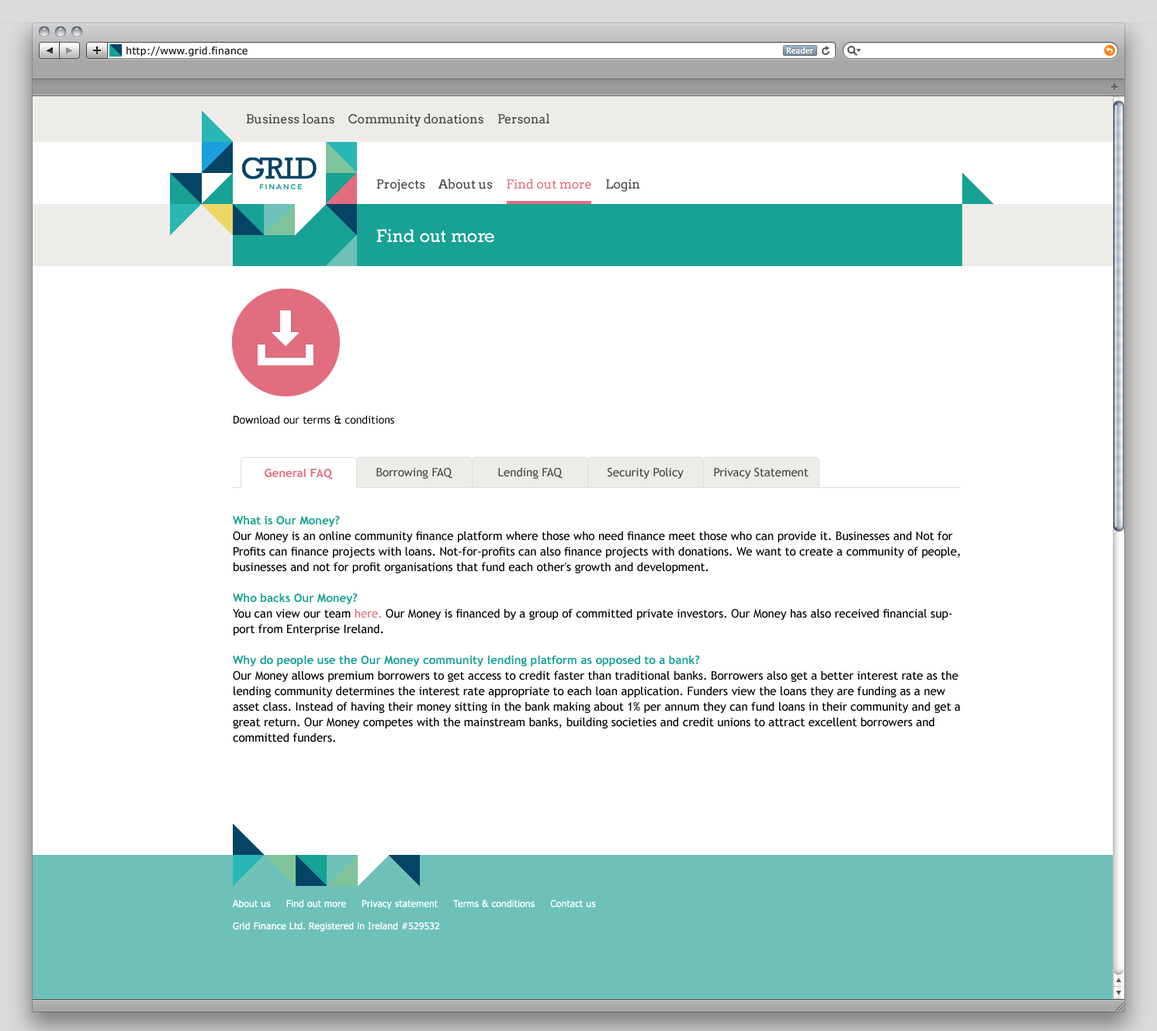
<style>
.page{position:relative;width:1157px;height:1031px;background:#ffffff}
.page>*{position:absolute;margin:0}
.t1{font:10.1px "Verdana";color:#000000}
.t2{font:12.4px "Arvo";color:#414141}
.t3{font:12.4px "Arvo";color:#e26d7e}
.t4{font:18.6px "Rockwell";color:#ffffff}
.t5{font:10.9px "TrebuchetMS";color:#000000}
.t6{font:11.6px "TrebuchetMS-Bold";color:#e26d7e}
.t7{font:11.6px "TrebuchetMS";color:#464646}
.t8{font:11.6px/15.5px "TrebuchetMS";color:#000000}
.t9{font:11.6px/15.5px "TrebuchetMS-Bold";color:#18a195}
.t10{font:11.6px/15.5px "TrebuchetMS";color:#e26d7e}
.t11{font:9.3px "Tahoma";letter-spacing:0.02em;color:#ffffff}
</style>
<div class="page">
<p class="t1" style="left:126px;top:47px;width:121px;height:10px">http://www.grid.finance</p>
<p class="t2" style="left:246px;top:113px;width:303px;height:13px">Business loans     Community donations     Personal</p>
<p class="t2" style="left:376px;top:178px;width:264px;height:14px">Projects     About us     <span class="t3">Find out more </span>    Login</p>
<p class="t4" style="left:376px;top:229px;width:118px;height:14px">Find out more</p>
<p class="t5" style="left:233px;top:415px;width:161px;height:9px">Download our terms &amp; conditions</p>
<p class="t6" style="left:265px;top:468px;width:68px;height:11px">General FAQ</p>
<p class="t7" style="left:376px;top:468px;width:76px;height:11px">Borrowing FAQ</p>
<p class="t7" style="left:498px;top:468px;width:64px;height:11px">Lending FAQ</p>
<p class="t7" style="left:607px;top:468px;width:76px;height:11px">Security Policy</p>
<p class="t7" style="left:714px;top:468px;width:94px;height:11px">Privacy Statement</p>
<p class="t8" style="left:233px;top:515px;width:727px;height:227px"><span class="t9">What is Our Money?<br></span>Our Money is an online community finance platform where those who need finance meet those who can provide it. Businesses and Not for Profits can finance projects with loans. Not-for-profits can also finance projects with donations. We want to create a community of people, businesses and not for profit organisations that fund each other's growth and development.<br><br><span class="t9">Who backs Our Money?<br></span>You can view our team <span class="t10">here.</span> Our Money is financed by a group of committed private investors. Our Money has also received financial support from Enterprise Ireland.<br><br><span class="t9">Why do people use the Our Money community lending platform as opposed to a bank?<br></span>Our Money allows premium borrowers to get access to credit faster than traditional banks. Borrowers also get a better interest rate as the lending community determines the interest rate appropriate to each loan application. Funders view the loans they are funding as a new asset class. Instead of having their money sitting in the bank making about 1% per annum they can fund loans in their community and get a great return. Our Money competes with the mainstream banks, building societies and credit unions to attract excellent borrowers and committed funders.</p>
<p class="t11" style="left:232px;top:900px;width:364px;height:32px">About us     Find out more     Privacy statement     Terms &amp; conditions     Contact us<br><br>Grid Finance Ltd. Registered in Ireland #529532</p>
</div>
